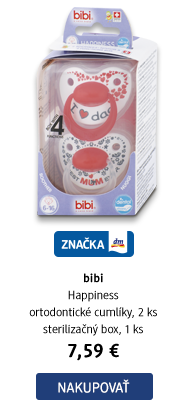
<style>
.page{position:relative;width:188px;height:409px;background:#ffffff}
.page>*{position:absolute;margin:0}
.t1{font:12px/17px "DMBrand-Regular";color:#000000}
.t2{font:12px "DMBrand-Bold";letter-spacing:0.025em;color:#000000}
.t3{font:20px "DMBrand-Bold";letter-spacing:0.04em;color:#000000}
.t4{font:14px "DMBrand-Regular";letter-spacing:0.025em;color:#ffffff;text-transform:uppercase}
</style>
<div class="page">
<p class="t1" style="left:29px;top:273px;width:128px;height:88px;text-align:center"><span class="t2">bibi<br></span>Happiness<br>ortodontické cumlíky, 2 ks<br>sterilizačný box, 1 ks<br><span class="t3">7,59 €</span></p>
<p class="t4" style="left:58px;top:379px;width:72px;height:14px">Nakupovať</p>
</div>
